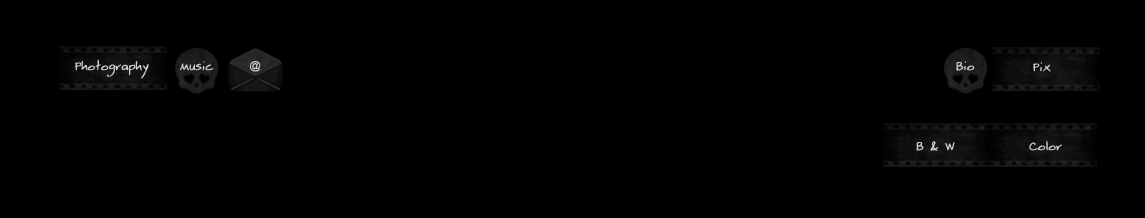
<style>
.page{position:relative;width:1145px;height:218px;background:#000000}
.page>*{position:absolute;margin:0}
.t1{font:13.4px "Beatty";color:#cecece;font-weight:bold}
.t2{font:13.4px "Beatty";color:#cecece;font-weight:bold;scale:0.93 1}
.t3{font:11px "ArialMT";color:#cecece;font-weight:bold}
</style>
<div class="page">
<p class="t1" style="left:75px;top:59px;width:74px;height:20px">Photography</p>
<p class="t2" style="left:180px;top:61px;width:34px;height:10px">Music</p>
<p class="t3" style="left:250px;top:61px;width:11px;height:11px">@</p>
<p class="t1" style="left:956px;top:61px;width:19px;height:10px">Bio</p>
<p class="t1" style="left:1033px;top:62px;width:18px;height:10px">Pix</p>
<p class="t1" style="left:916px;top:141px;width:39px;height:10px">B &amp; W</p>
<p class="t1" style="left:1029px;top:141px;width:33px;height:10px">Color</p>
</div>
